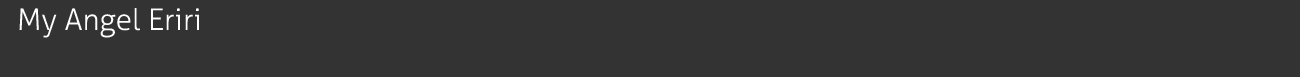
<style>
.page{position:relative;width:1300px;height:77px;background:#333333}
.page>*{position:absolute;margin:0}
.t1{font:30px "Aller-Light";color:#ffffff}
</style>
<div class="page">
<p class="t1" style="left:19px;top:8px;width:180px;height:30px">My Angel Eriri</p>
</div>
